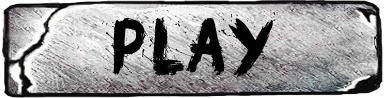
<style>
.page{position:relative;width:384px;height:98px}
.page>*{position:absolute;margin:0}
.t1{font:72px "OhNo";color:#010101}
</style>
<div class="page">
<p class="t1" style="left:102px;top:12px;width:174px;height:66px">P LAY</p>
</div>
